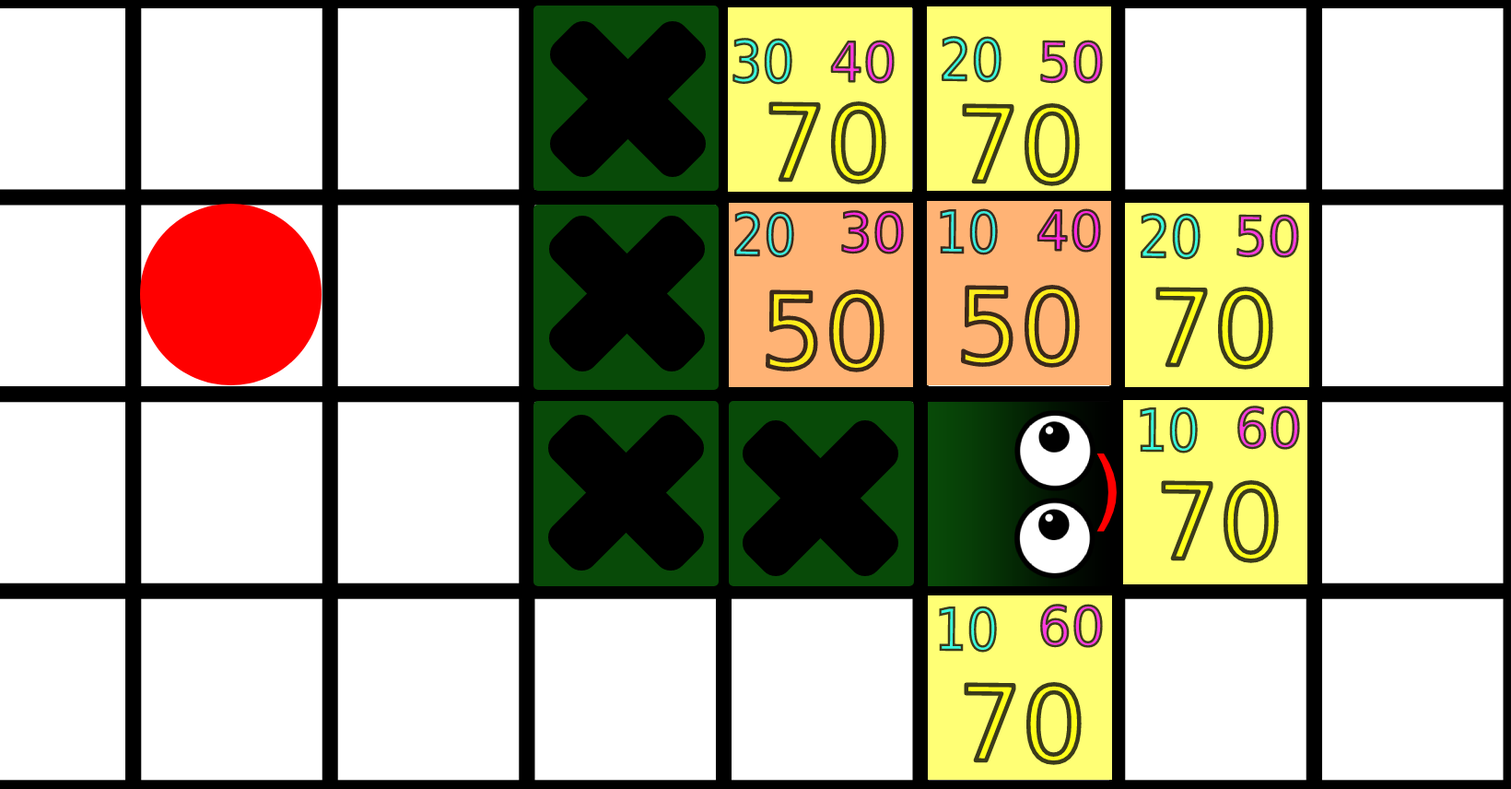
<style>
.page{position:relative;width:1511px;height:789px;background:#ffffff}
.page>*{position:absolute;margin:0}
.t1{font:57.8px "DejaVuSans";scale:0.87 1}
.t2{font:54.4px "DejaVuSans"}
.t3{font:103.6px "DejaVuSans"}
.t4{font:87.5px "DejaVuSans";color:#ff0000}
</style>
<div class="page">
<p class="t1" style="left:733px;top:38px;width:60px;height:47px;rotate:1deg">30</p>
<p class="t2" style="left:830px;top:40px;width:65px;height:44px;rotate:1deg">40</p>
<p class="t1" style="left:942px;top:36px;width:60px;height:47px;rotate:1deg">20</p>
<p class="t2" style="left:1041px;top:40px;width:62px;height:44px;rotate:1deg">50</p>
<p class="t3" style="left:768px;top:100px;width:120px;height:85px;rotate:1deg">70</p>
<p class="t3" style="left:961px;top:102px;width:120px;height:85px;rotate:1deg">70</p>
<p class="t1" style="left:940px;top:208px;width:58px;height:47px;rotate:1deg">10</p>
<p class="t2" style="left:1037px;top:208px;width:64px;height:45px;rotate:1deg">40</p>
<p class="t1" style="left:735px;top:211px;width:59px;height:47px;rotate:1deg">20</p>
<p class="t2" style="left:841px;top:210px;width:63px;height:44px;rotate:1deg">30</p>
<p class="t1" style="left:1141px;top:213px;width:60px;height:47px;rotate:1deg">20</p>
<p class="t2" style="left:1237px;top:214px;width:63px;height:44px;rotate:1deg">50</p>
<p class="t3" style="left:765px;top:288px;width:121px;height:85px;rotate:1deg">50</p>
<p class="t3" style="left:960px;top:284px;width:121px;height:85px;rotate:1deg">50</p>
<p class="t3" style="left:1155px;top:286px;width:120px;height:84px;rotate:1deg">70</p>
<p class="t1" style="left:1140px;top:406px;width:58px;height:47px;rotate:1deg">10</p>
<p class="t2" style="left:1238px;top:406px;width:62px;height:44px;rotate:1deg">60</p>
<p class="t4" style="left:1097px;top:453px;width:20px;height:79px">)</p>
<p class="t3" style="left:1160px;top:479px;width:120px;height:85px;rotate:1deg">70</p>
<p class="t1" style="left:939px;top:606px;width:58px;height:47px;rotate:1deg">10</p>
<p class="t2" style="left:1041px;top:604px;width:62px;height:44px;rotate:1deg">60</p>
<p class="t3" style="left:963px;top:681px;width:120px;height:85px;rotate:1deg">70</p>
</div>
